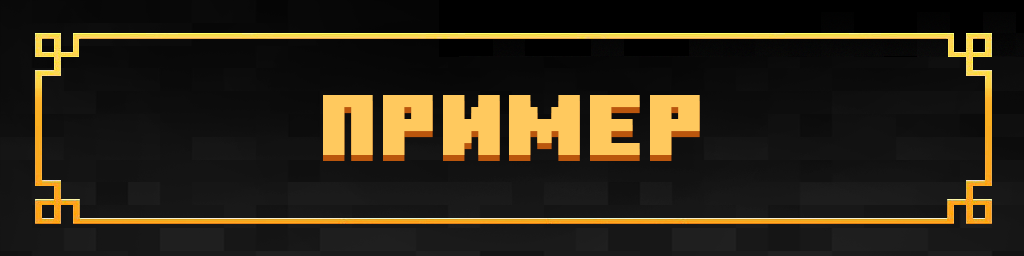
<style>
.page{position:relative;width:1024px;height:256px}
.page>*{position:absolute;margin:0}
.t1{font:86.1px "MinecraftTen";color:#ffc95e;text-transform:uppercase;scale:1.18 1}
</style>
<div class="page">
<p class="t1" style="left:323px;top:101px;width:377px;height:60px">Пример</p>
<p class="t1" style="left:323px;top:95px;width:377px;height:60px">Пример</p>
</div>
